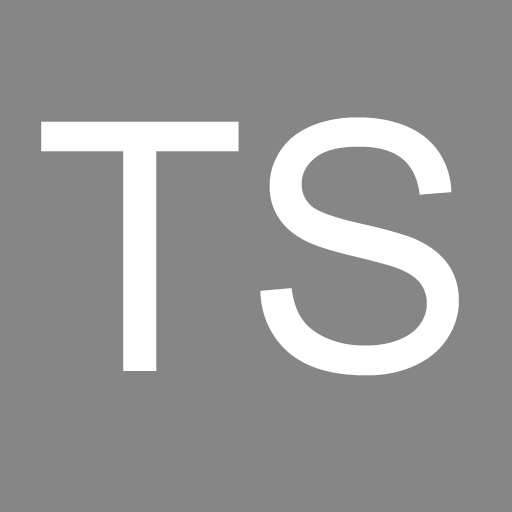
<style>
.page{position:relative;width:512px;height:512px;background:#868686}
.page>*{position:absolute;margin:0}
.t1{font:348.3px "ArialMT";color:#ffffff}
</style>
<div class="page">
<p class="t1" style="left:41px;top:117px;width:418px;height:259px">TS</p>
</div>
